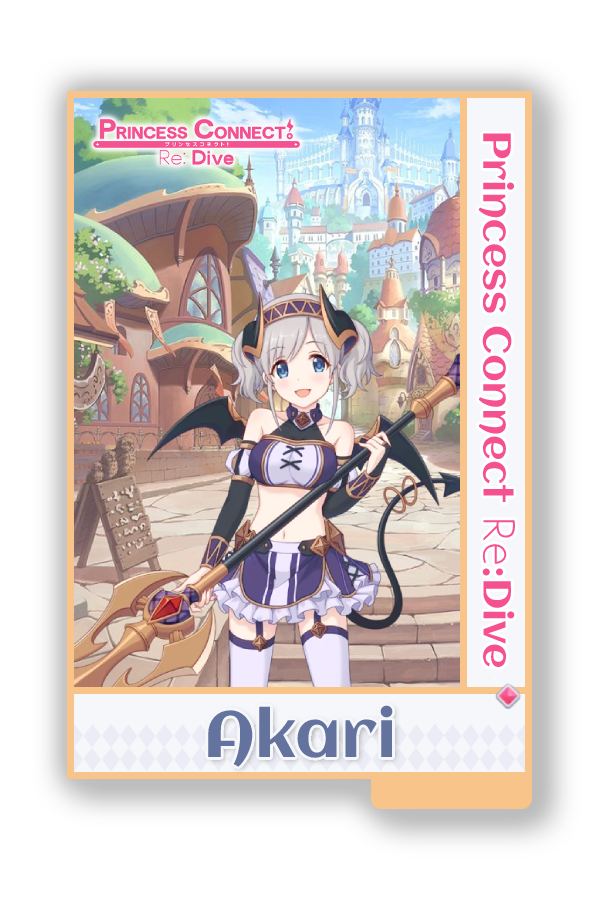
<style>
.page{position:relative;width:600px;height:900px;background:#ffffff}
.page>*{position:absolute;margin:0}
.t1{font:39px "Aclonica-Regular";color:#f55191}
.t2{font:39px "AaarghNormal";color:#f55191}
.t3{font:65px "Aclonica-Regular";color:#64739d}
</style>
<div class="page">
<p class="t1" style="left:478px;top:133px;width:38px;height:534px;rotate:90deg">Princess Connect <span class="t2">Re</span>:Dive</p>
<p class="t3" style="left:208px;top:705px;width:185px;height:62px">Akari</p>
</div>
